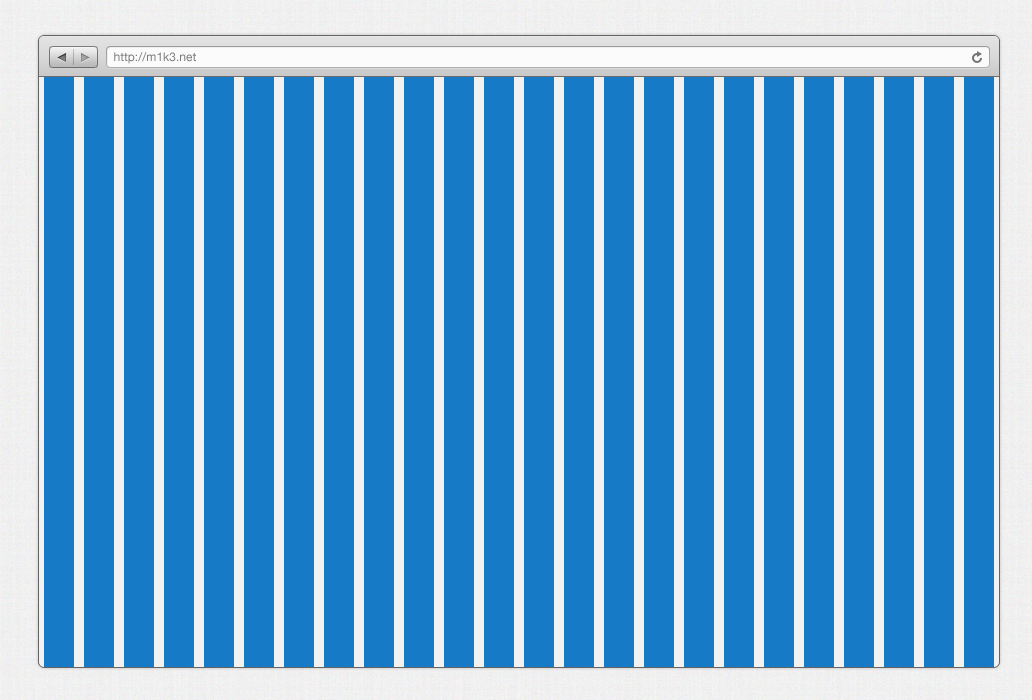
<style>
.page{position:relative;width:1032px;height:700px;background:#177ac6}
.page>*{position:absolute;margin:0}
.t1{font:12px "HelveticaNeue";color:#7b7b7b}
</style>
<div class="page">
<p class="t1" style="left:114px;top:52px;width:82px;height:12px">http://m1k3.net</p>
</div>
